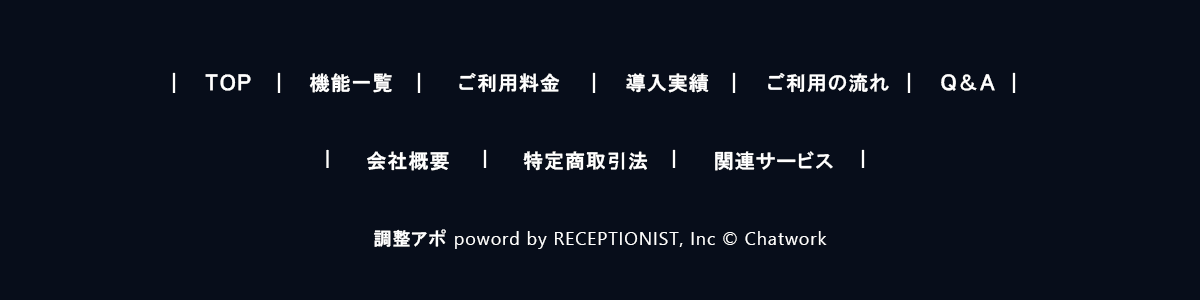
<style>
.page{position:relative;width:1200px;height:300px;background:#070d1a}
.page>*{position:absolute;margin:0}
.t1{font:20px "HGPGothicE";letter-spacing:0.05em;color:#ffffff}
.t2{font:18px "SegoeUISymbol";letter-spacing:0.05em;color:#ffffff}
.t3{font:18px "HGPGothicE";letter-spacing:0.05em;color:#ffffff}
</style>
<div class="page">
<p class="t1" style="left:205px;top:73px;width:790px;height:20px">ＴＯＰ　　　　機能一覧　　 　　ご利用料金　　　　 導入実績　　　　ご利用の流れ 　　　Ｑ＆Ａ</p>
<p class="t1" style="left:367px;top:151px;width:466px;height:20px">会社概要  　　　　特定商取引法　　　　 関連サービス</p>
<p class="t2" style="left:374px;top:229px;width:453px;height:20px"><span class="t3">調整アポ </span>poword by RECEPTIONIST, Inc © Chatwork</p>
</div>
